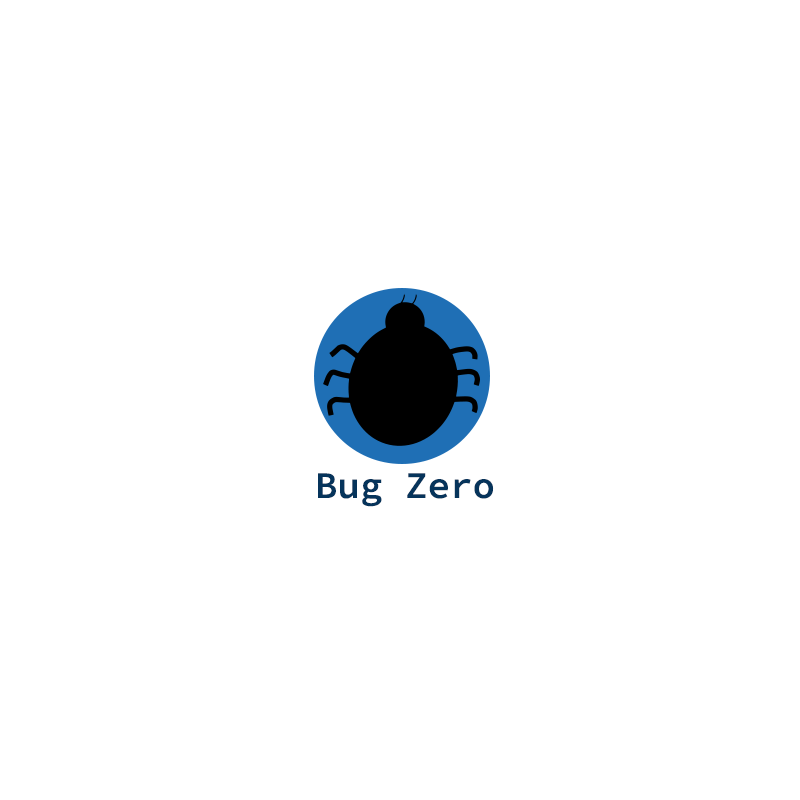
<style>
.page{position:relative;width:800px;height:800px;background:#ffffff}
.page>*{position:absolute;margin:0}
.t1{font:37.5px "SourceCodeRoman-Semibold";color:#06345b}
</style>
<div class="page">
<p class="t1" style="left:318px;top:473px;width:176px;height:34px">Bug Zero</p>
</div>
